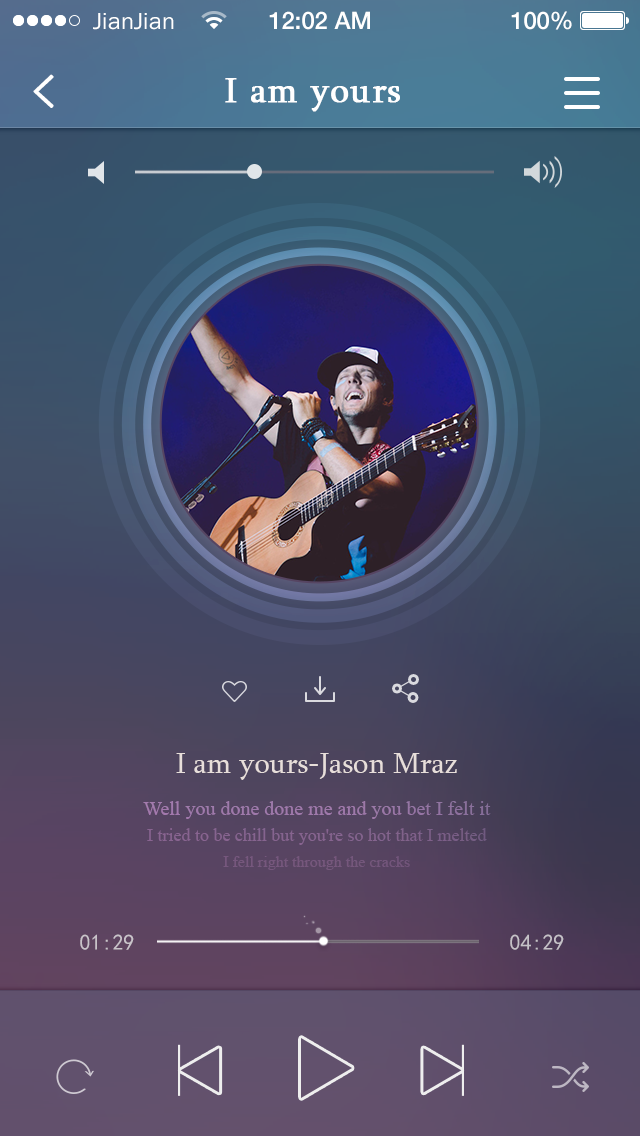
<style>
.page{position:relative;width:640px;height:1136px}
.page>*{position:absolute;margin:0}
.t1{font:24px "FranklinGothic-Book";color:#ffffff}
.t2{font:24px "HelveticaNeue-Medium";color:#ffffff}
.t3{font:45.3px "SimHei";color:#ffffff;font-weight:bold}
.t4{font:36px "Sylfaen";letter-spacing:0.025em;color:#ffffff;font-weight:bold}
.t5{font:30px "Sylfaen";color:#e7deda}
.t6{font:20px "MyriadPro-Regular";color:#9e79ab}
.t7{font:18px "MyriadPro-Regular";color:#85648f}
.t8{font:16px "MyriadPro-Regular";color:#76577c}
.t9{font:22px "SimHei";color:#c9c3c9}
.t10{font:22px "SimHei";color:#c5c1c7}
</style>
<div class="page">
<p class="t1" style="left:93px;top:13px;width:81px;height:17px">JianJian</p>
<p class="t2" style="left:269px;top:11px;width:101px;height:19px">12:02 AM</p>
<p class="t2" style="left:511px;top:11px;width:61px;height:19px">100%</p>
<p class="t3" style="left:33px;top:74px;width:21px;height:34px">&lt;</p>
<p class="t4" style="left:225px;top:78px;width:175px;height:34px">I am yours</p>
<p class="t5" style="left:176px;top:753px;width:281px;height:27px">I am yours-Jason Mraz</p>
<p class="t6" style="left:143px;top:801px;width:348px;height:18px">Well you done done me and you bet I felt it</p>
<p class="t7" style="left:147px;top:828px;width:340px;height:17px">I tried to be chill but you're so hot that I melted</p>
<p class="t8" style="left:223px;top:856px;width:187px;height:14px">I fell right through the cracks</p>
<p class="t9" style="left:80px;top:934px;width:54px;height:16px">01:29</p>
<p class="t10" style="left:510px;top:934px;width:54px;height:16px">04:29</p>
</div>
